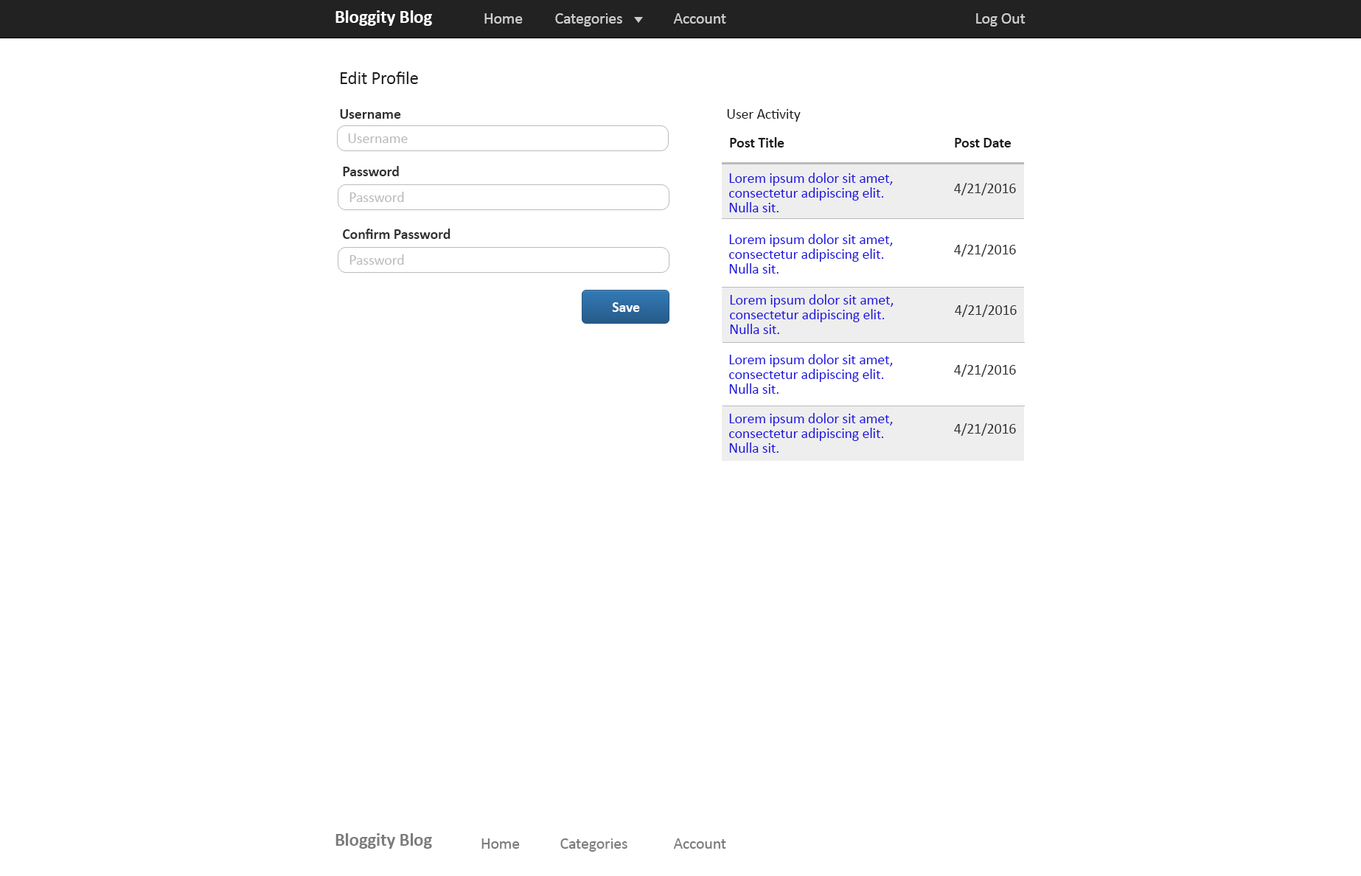
<style>
.page{position:relative;width:1361px;height:876px;background:#ffffff}
.page>*{position:absolute;margin:0}
.t1{font:18.4px "Calibri-Bold";letter-spacing:-0.01em;color:#ffffff}
.t2{font:16.2px "Calibri";letter-spacing:-0.01em;color:#cccccc}
.t3{font:18.4px "Calibri";letter-spacing:-0.01em;color:#1c1c1c}
.t4{font:14.7px "Calibri-Bold";letter-spacing:-0.01em;color:#323232}
.t5{font:14.7px "Calibri";letter-spacing:-0.01em;color:#1c1c1c}
.t6{font:14.7px "Calibri";letter-spacing:-0.01em;color:#bbbbbb}
.t7{font:14.7px "Calibri-Bold";letter-spacing:-0.01em;color:#1c1c1c}
.t8{font:14.7px/14.7px "Calibri";letter-spacing:-0.01em;color:#1d14de}
.t9{font:14.7px/14.7px "Calibri";letter-spacing:-0.01em;color:#1c1c1c}
.t10{font:14.7px "Calibri";letter-spacing:-0.01em;color:#323233}
.t11{font:14.7px "Calibri-Bold";letter-spacing:-0.01em;color:#ffffff}
.t12{font:18.4px "Calibri-Bold";letter-spacing:-0.01em;color:#7d7c7c}
.t13{font:16.2px "Calibri";letter-spacing:-0.01em;color:#7d7c7c}
</style>
<div class="page">
<p class="t1" style="left:336px;top:10px;width:96px;height:16px">Bloggity Blog</p>
<p class="t2" style="left:484px;top:13px;width:39px;height:11px">Home</p>
<p class="t2" style="left:555px;top:13px;width:67px;height:14px">Categories</p>
<p class="t2" style="left:673px;top:13px;width:53px;height:11px">Account</p>
<p class="t2" style="left:976px;top:13px;width:50px;height:14px">Log Out</p>
<p class="t3" style="left:341px;top:72px;width:77px;height:12px">Edit Profile</p>
<p class="t4" style="left:340px;top:109px;width:61px;height:10px">Username</p>
<p class="t5" style="left:727px;top:109px;width:74px;height:13px">User Activity</p>
<p class="t6" style="left:348px;top:133px;width:60px;height:10px">Username</p>
<p class="t7" style="left:730px;top:137px;width:55px;height:10px">Post Title</p>
<p class="t7" style="left:955px;top:138px;width:56px;height:9px">Post Date</p>
<p class="t4" style="left:343px;top:166px;width:56px;height:10px">Password</p>
<p class="t8" style="left:729px;top:173px;width:164px;height:39px"><span class="t9"><br><br></span>Lorem ipsum dolor sit amet, consectetur adipiscing elit. Nulla sit.</p>
<p class="t10" style="left:954px;top:183px;width:62px;height:12px">4/21/2016</p>
<p class="t6" style="left:350px;top:192px;width:54px;height:10px">Password</p>
<p class="t4" style="left:343px;top:229px;width:108px;height:10px">Confirm Password</p>
<p class="t8" style="left:729px;top:234px;width:164px;height:40px"><span class="t9"><br><br></span>Lorem ipsum dolor sit amet, consectetur adipiscing elit. Nulla sit.</p>
<p class="t10" style="left:954px;top:244px;width:62px;height:13px">4/21/2016</p>
<p class="t6" style="left:350px;top:254px;width:54px;height:11px">Password</p>
<p class="t11" style="left:612px;top:302px;width:28px;height:10px">Save</p>
<p class="t8" style="left:730px;top:294px;width:164px;height:40px"><span class="t9"><br><br></span>Lorem ipsum dolor sit amet, consectetur adipiscing elit. Nulla sit.</p>
<p class="t10" style="left:955px;top:305px;width:62px;height:12px">4/21/2016</p>
<p class="t8" style="left:729px;top:354px;width:164px;height:40px"><span class="t9"><br><br></span>Lorem ipsum dolor sit amet, consectetur adipiscing elit. Nulla sit.</p>
<p class="t10" style="left:954px;top:364px;width:62px;height:13px">4/21/2016</p>
<p class="t8" style="left:729px;top:413px;width:164px;height:40px"><span class="t9"><br><br></span>Lorem ipsum dolor sit amet, consectetur adipiscing elit. Nulla sit.</p>
<p class="t10" style="left:954px;top:423px;width:62px;height:13px">4/21/2016</p>
<p class="t12" style="left:336px;top:833px;width:96px;height:16px">Bloggity Blog</p>
<p class="t13" style="left:482px;top:838px;width:38px;height:11px">Home</p>
<p class="t13" style="left:560px;top:838px;width:68px;height:14px">Categories</p>
<p class="t13" style="left:673px;top:838px;width:53px;height:11px">Account</p>
</div>
